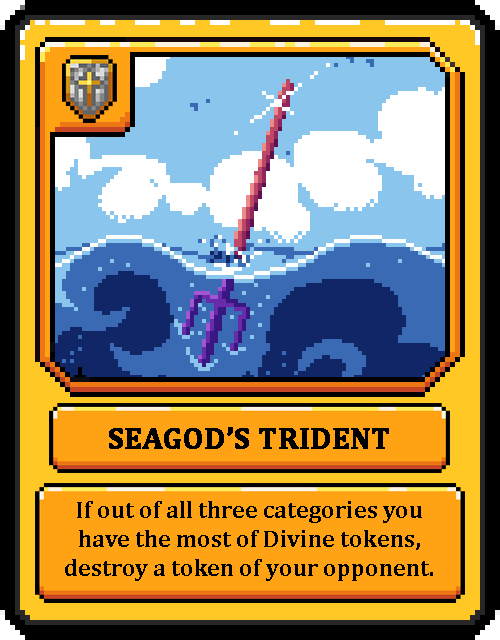
<style>
.page{position:relative;width:500px;height:640px;background:#000000}
.page>*{position:absolute;margin:0}
.t1{font:30px "Cambria-Bold";color:#000000;text-transform:uppercase;font-weight:bold}
.t2{font:24px "Cambria-Bold";color:#000000}
</style>
<div class="page">
<p class="t1" style="left:109px;top:427px;width:280px;height:22px">Seagod’s Trident</p>
<p class="t2" style="left:65px;top:501px;width:368px;height:80px;text-align:center">If out of all three categories you have the most of Divine tokens, destroy a token of your opponent.</p>
</div>
